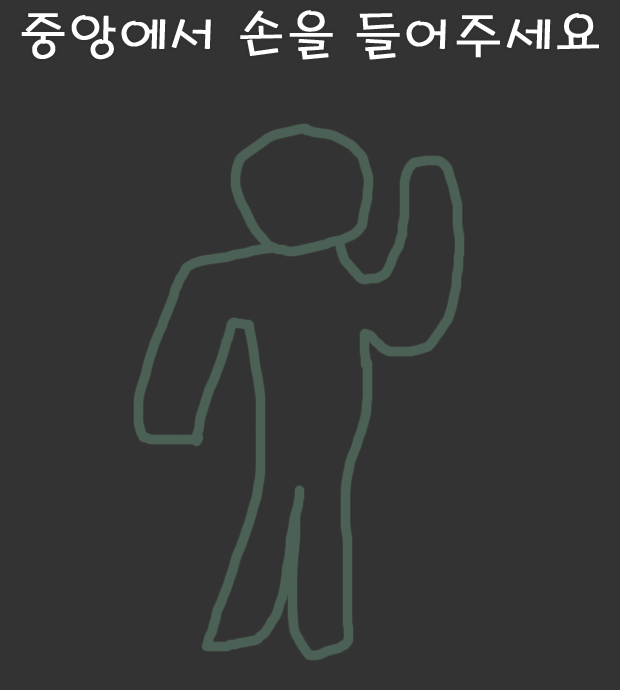
<style>
.page{position:relative;width:620px;height:690px;background:#333333}
.page>*{position:absolute;margin:0}
.t1{font:48.7px "H2porL";color:#ffffff;font-weight:bold}
</style>
<div class="page">
<p class="t1" style="left:21px;top:10px;width:578px;height:50px">중앙에서 손을 들어주세요</p>
</div>
